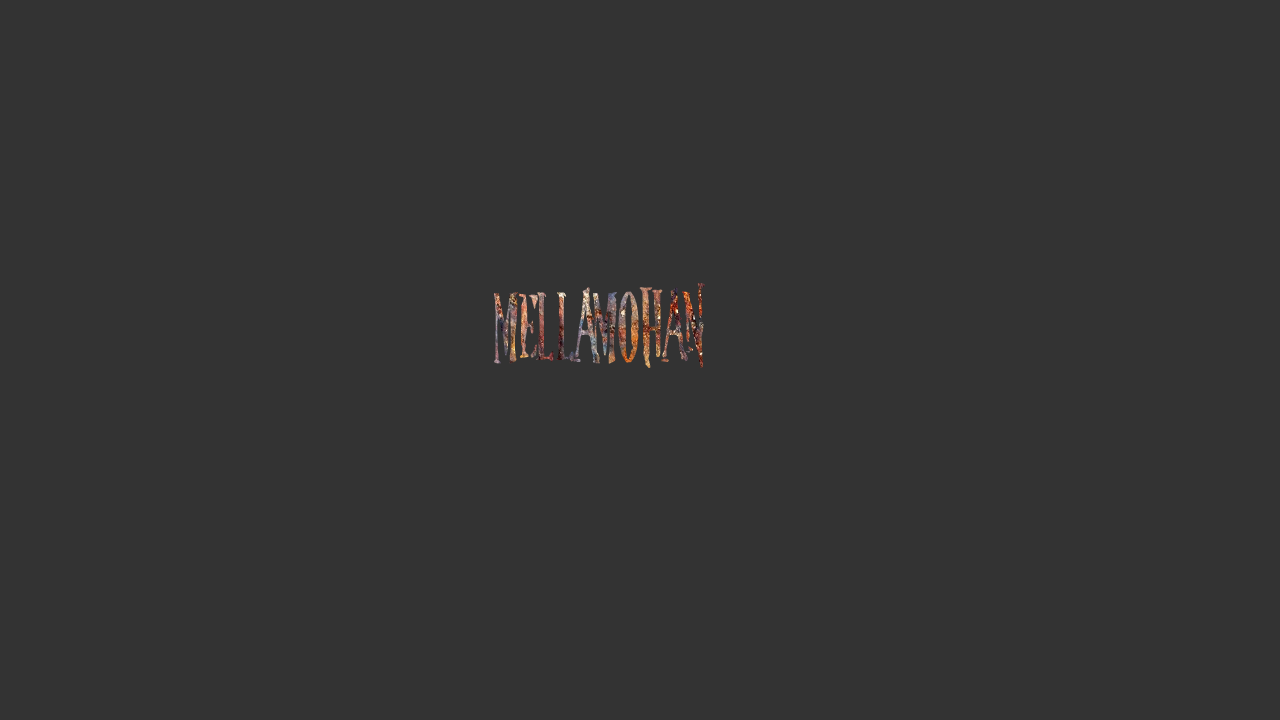
<style>
.page{position:relative;width:1280px;height:720px;background:#333333}
.page>*{position:absolute;margin:0}
.t1{font:100px "Nightmare5-Regular"}
</style>
<div class="page">
<p class="t1" style="left:494px;top:283px;width:211px;height:85px">MELLAMOHAN</p>
</div>
